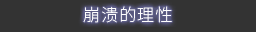
<style>
.page{position:relative;width:256px;height:32px;background:#333333}
.page>*{position:absolute;margin:0}
.t1{font:17px "NotoSansSC-Thin";letter-spacing:0.06em;color:#ffffff}
</style>
<div class="page">
<p class="t1" style="left:83px;top:6px;width:89px;height:17px">崩溃的理性</p>
</div>
